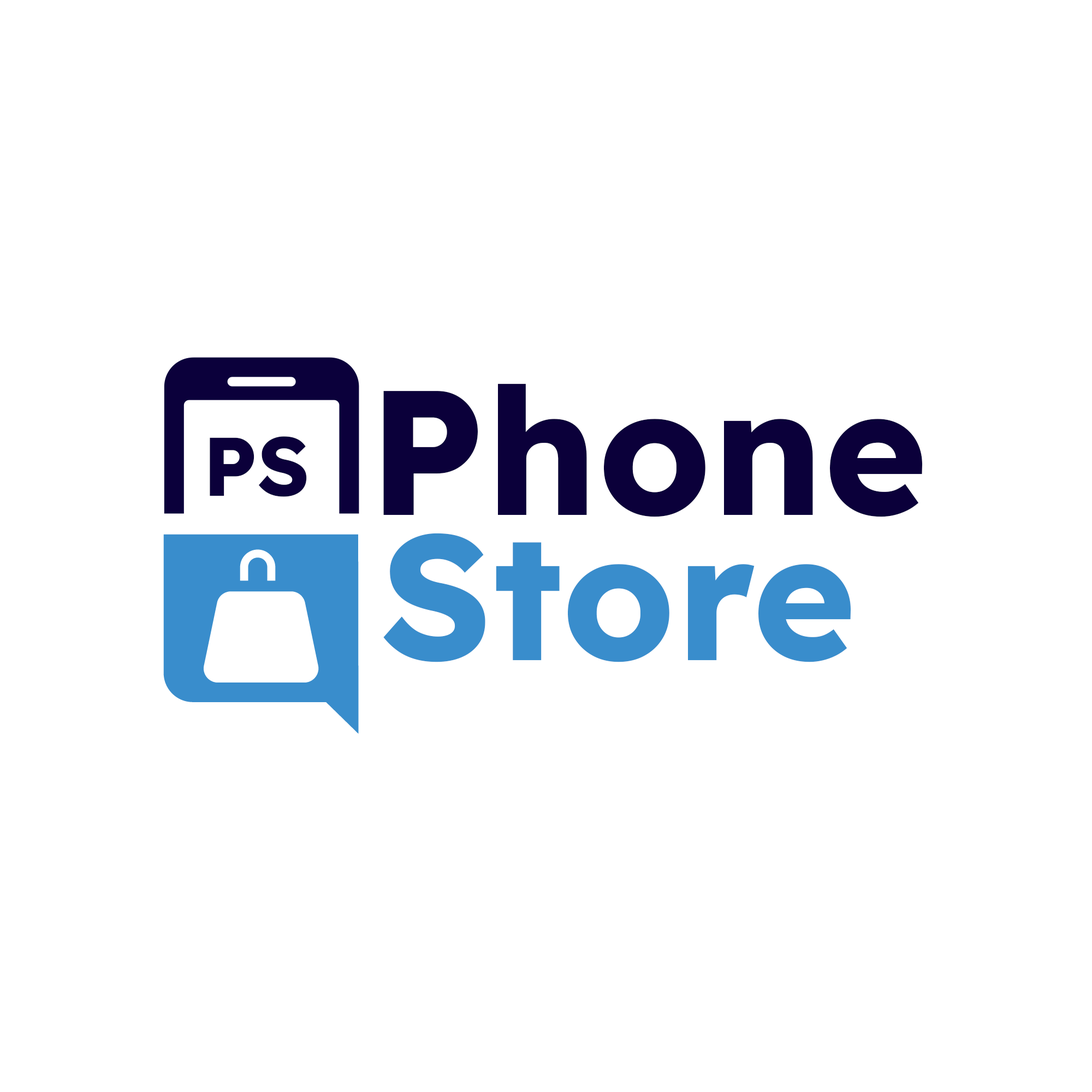
<style>
.page{position:relative;width:1092px;height:1092px;background:#ffffff}
.page>*{position:absolute;margin:0}
.t1{font:177px "Lexend-Bold";color:#0b003b}
.t2{font:82.9px "Lexend-Bold";color:#0b003b}
.t3{font:177px "Lexend-Bold";color:#398ecc}
</style>
<div class="page">
<p class="t1" style="left:383px;top:384px;width:539px;height:133px">Phone</p>
<p class="t2" style="left:210px;top:436px;width:97px;height:61px">PS</p>
<p class="t3" style="left:383px;top:533px;width:468px;height:129px">Store</p>
</div>
